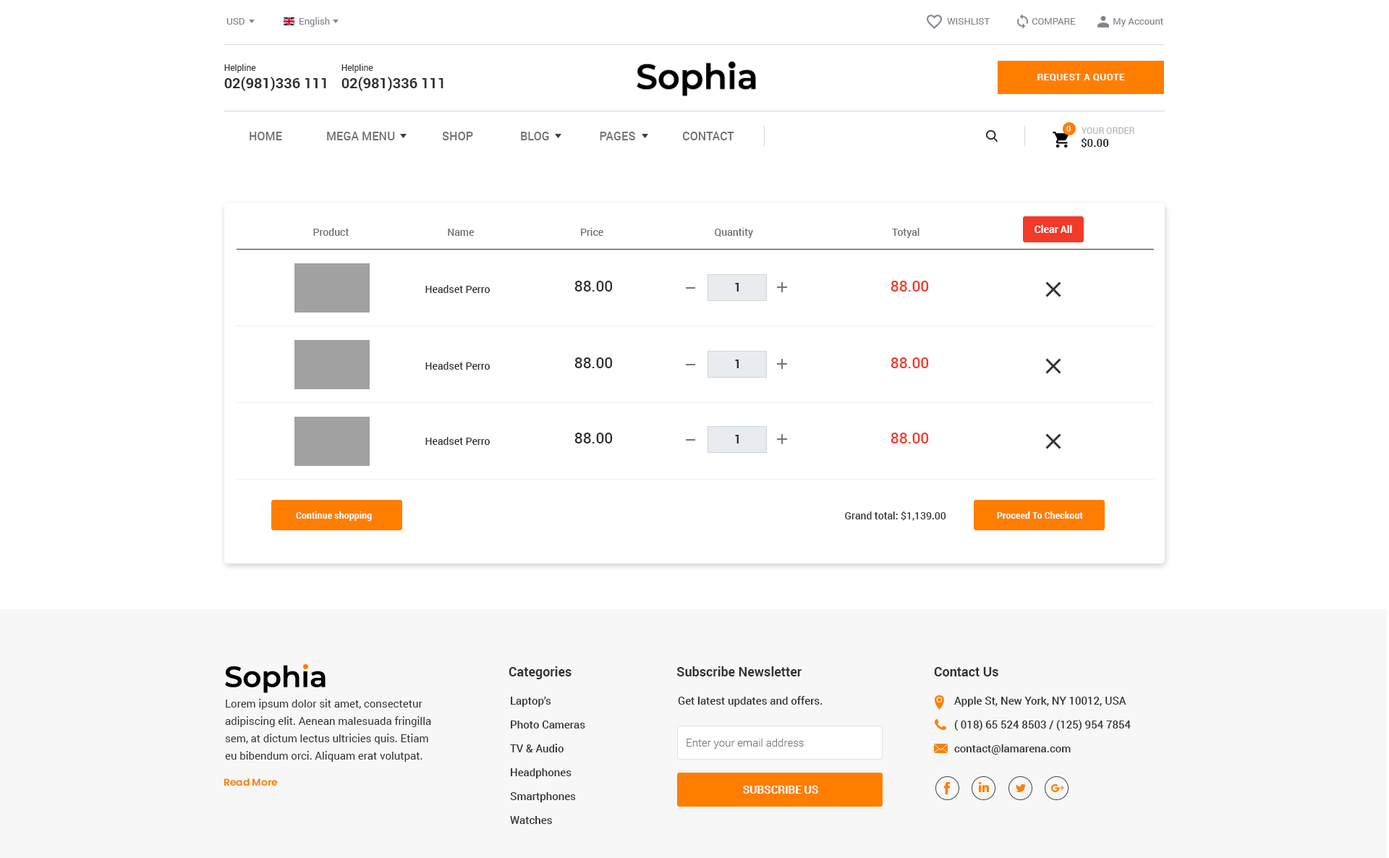
<style>
.page{position:relative;width:1389px;height:858px;background:#ffffff}
.page>*{position:absolute;margin:0}
.t1{font:9.4px "Roboto-Regular";color:#81858c}
.t2{font:14.5px "Roboto-Bold";color:#333333}
.t3{font:8.7px "Roboto-Regular";color:#333333}
.t4{font:9.4px "Roboto-Bold";letter-spacing:0.04em;color:#ffffff}
.t5{font:8px "Roboto-Regular";color:#ffffff}
.t6{font:11.6px "Roboto-Medium";color:#737373}
.t7{font:10.9px "Roboto-Bold";color:#333333}
.t8{font:8.7px "Roboto-Regular";color:#b8b7b7}
.t9{font:10.1px "Roboto-Medium";color:#6f6f6f}
.t10{font:10.1px "Roboto-Bold";color:#fefefe}
.t11{font:15.2px "Roboto-Medium";color:#333333}
.t12{font:15.2px "Roboto-Medium";color:#f33927}
.t13{font:10.1px "Roboto-Medium";color:#333333}
.t14{font:11.6px "Roboto-Bold";color:#333333}
.t15{font:8.7px "Roboto-Bold";color:#ffffff;scale:1.03 1}
.t16{font:13px "Roboto-Bold";color:#333333}
.t17{font:10.9px/17.4px "Roboto-Regular";color:#333333}
.t18{font:10.9px/23.9px "Roboto-Medium";color:#333333}
.t19{font:10.9px "Roboto-Medium";color:#333333}
.t20{font:10.9px "Roboto-Light";color:#777777}
.t21{font:9.8px "Poppins-SemiBold";color:#ff7e00}
.t22{font:10.9px "Roboto-Bold";color:#ffffff}
</style>
<div class="page">
<p class="t1" style="left:300px;top:17px;width:30px;height:10px">English</p>
<p class="t1" style="left:227px;top:18px;width:18px;height:7px">USD</p>
<p class="t1" style="left:947px;top:18px;width:217px;height:9px">WISHLIST                  COMPARE                My Account</p>
<p class="t2" style="left:224px;top:64px;width:102px;height:27px"><span class="t3">Helpline<br></span>02(981)336 111</p>
<p class="t2" style="left:342px;top:64px;width:102px;height:27px"><span class="t3">Helpline<br></span>02(981)336 111</p>
<p class="t4" style="left:1038px;top:74px;width:87px;height:7px">REQUEST A QUOTE</p>
<p class="t5" style="left:1067px;top:126px;width:4px;height:6px">0</p>
<p class="t6" style="left:250px;top:132px;width:484px;height:8px">HOME               MEGA MENU                SHOP                BLOG                 PAGES                CONTACT</p>
<p class="t7" style="left:1081px;top:137px;width:28px;height:11px">$0.00</p>
<p class="t8" style="left:1082px;top:127px;width:53px;height:7px">YOUR ORDER</p>
<p class="t9" style="left:313px;top:228px;width:607px;height:10px">Product                                       Name                                          Price                                            Quantity                                                       Totyal</p>
<p class="t10" style="left:1035px;top:225px;width:37px;height:8px">Clear All</p>
<p class="t11" style="left:575px;top:281px;width:38px;height:11px">88.00</p>
<p class="t12" style="left:891px;top:281px;width:38px;height:11px">88.00</p>
<p class="t9" style="left:426px;top:285px;width:64px;height:8px;text-align:center"><span class="t13">Headset Perro<br></span>class="product-name"&gt;Headset Perro&lt;/a&gt;</p>
<p class="t14" style="left:735px;top:283px;width:4px;height:9px">1</p>
<p class="t9" style="left:426px;top:362px;width:64px;height:8px;text-align:center"><span class="t13">Headset Perro<br></span>class="product-name"&gt;Headset Perro&lt;/a&gt;</p>
<p class="t11" style="left:575px;top:357px;width:38px;height:11px">88.00</p>
<p class="t14" style="left:735px;top:360px;width:4px;height:8px">1</p>
<p class="t12" style="left:891px;top:357px;width:38px;height:11px">88.00</p>
<p class="t9" style="left:426px;top:437px;width:64px;height:8px;text-align:center"><span class="t13">Headset Perro<br></span>class="product-name"&gt;Headset Perro&lt;/a&gt;</p>
<p class="t11" style="left:575px;top:433px;width:38px;height:11px">88.00</p>
<p class="t14" style="left:735px;top:435px;width:4px;height:9px">1</p>
<p class="t12" style="left:891px;top:433px;width:38px;height:11px">88.00</p>
<p class="t15" style="left:296px;top:512px;width:76px;height:9px">Continue shopping</p>
<p class="t13" style="left:845px;top:511px;width:102px;height:10px">Grand total: $1,139.00</p>
<p class="t15" style="left:997px;top:512px;width:86px;height:7px">Proceed To Checkout</p>
<p class="t16" style="left:509px;top:666px;width:63px;height:14px">Categories</p>
<p class="t16" style="left:677px;top:666px;width:125px;height:11px">Subscribe Newsletter</p>
<p class="t16" style="left:934px;top:667px;width:65px;height:10px">Contact Us</p>
<p class="t17" style="left:225px;top:699px;width:206px;height:63px">Lorem ipsum dolor sit amet, consectetur adipiscing elit. Aenean malesuada fringilla sem, at dictum lectus ultricies quis. Etiam eu bibendum orci. Aliquam erat volutpat.</p>
<p class="t18" style="left:510px;top:697px;width:75px;height:127px">Laptop’s<br>Photo Cameras<br>TV &amp; Audio<br>Headphones<br>Smartphones<br>Watches</p>
<p class="t19" style="left:678px;top:696px;width:145px;height:11px">Get latest updates and offers.</p>
<p class="t18" style="left:954px;top:697px;width:177px;height:58px">Apple St, New York, NY 10012, USA<br>( 018) 65 524 8503 / (125) 954 7854<br>contact@lamarena.com</p>
<p class="t20" style="left:687px;top:739px;width:117px;height:10px">Enter your email address</p>
<p class="t21" style="left:224px;top:778px;width:54px;height:9px">Read More</p>
<p class="t22" style="left:743px;top:786px;width:75px;height:8px">SUBSCRIBE US</p>
</div>
